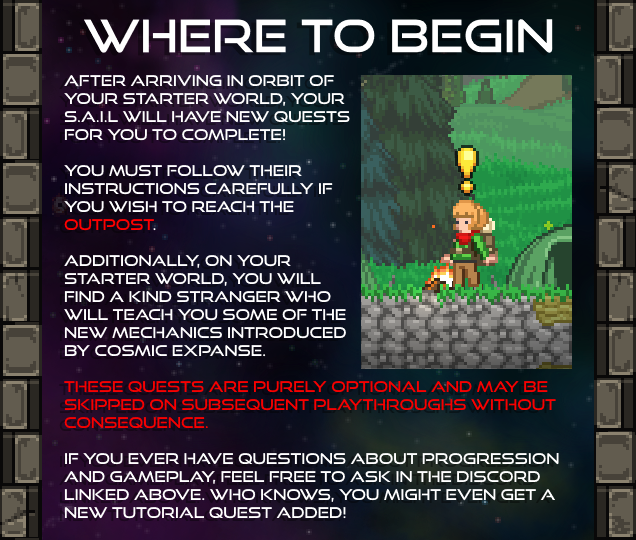
<style>
.page{position:relative;width:636px;height:540px}
.page>*{position:absolute;margin:0}
.t1{font:45px "GoodTimesRg-Regular";color:#ffffff}
.t2{font:15px "GoodTimesRg-Regular";color:#ffffff}
.t3{font:15px "GoodTimesRg-Regular";color:#ff0000}
.t4{font:15px "GoodTimesRg-Regular";color:#f80000}
</style>
<div class="page">
<p class="t1" style="left:83px;top:19px;width:470px;height:34px">WHERE TO BEGIN</p>
<p class="t2" style="left:64px;top:74px;width:495px;height:445px">After arriving in orbit of<br>your starter world, your<br>s.a.i.l will have new quests<br>for you to complete!<br><br>You must follow their<br>instructions carefully if<br>you wish to reach the<br><span class="t3">outpost</span>. <br><br>Additionally, on your<br>starter world, you will<br>find a kind stranger who<br>will teach you some of the<br>new mechanics introduced<br>by cosmic Expanse.<br><br><span class="t4">These quests are purely optional and may be<br>skipped on subsequent playthroughs without<br>Consequence.<br><br></span>if you ever have questions about progression<br>and gameplay, feel free to ask in the discord<br>linked above. Who knows, you might even get a<br>new tutorial quest added!</p>
</div>
